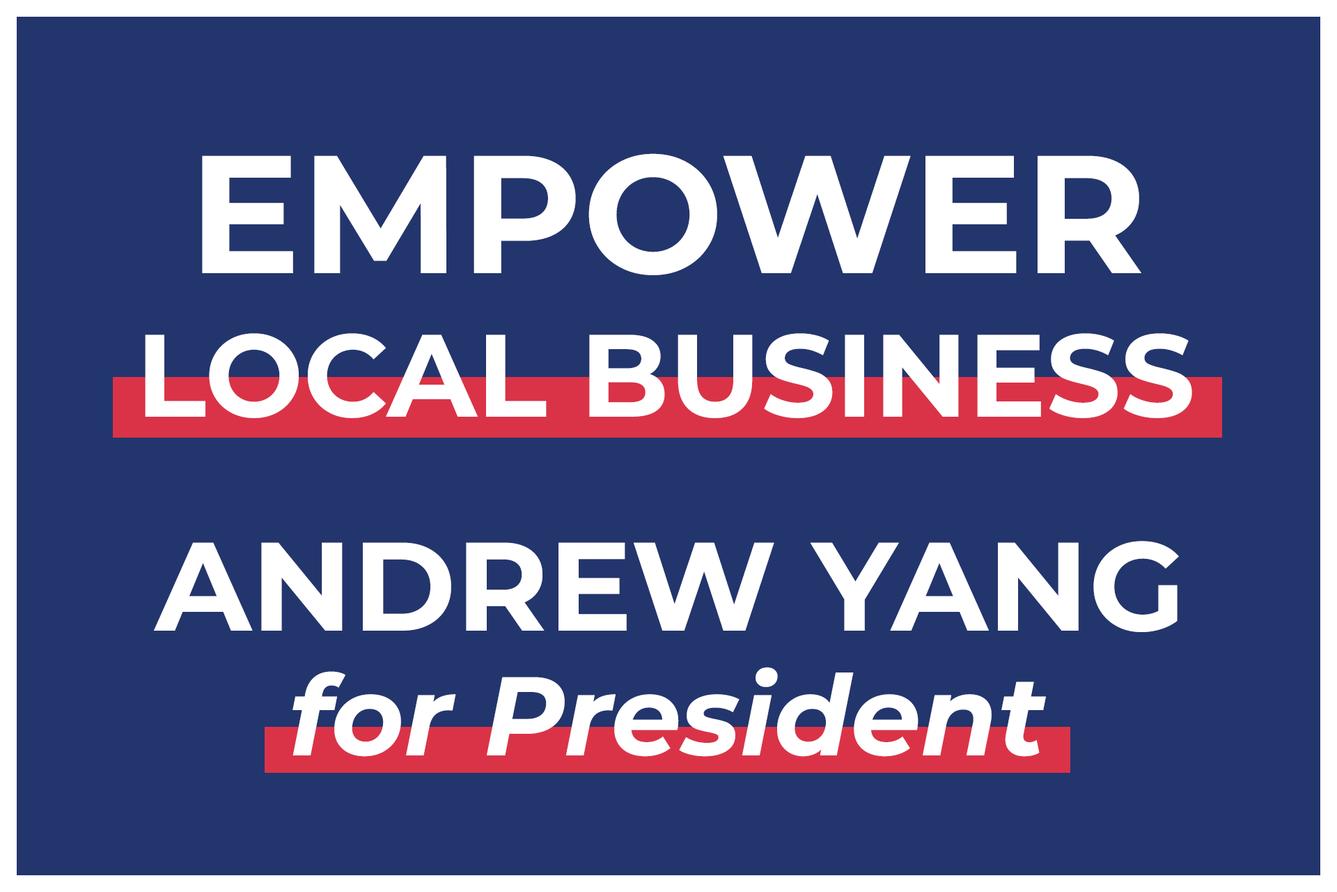
<style>
.page{position:relative;width:1337px;height:892px;background:#23356d}
.page>*{position:absolute;margin:0}
.t1{font:167.2px "Montserrat-Bold";color:#ffffff}
.t2{font:116.7px "Montserrat-Bold";color:#ffffff}
.t3{font:125.4px "Montserrat-Bold";color:#ffffff}
.t4{font:111.5px "Montserrat-BoldItalic";color:#ffffff}
</style>
<div class="page">
<p class="t1" style="left:202px;top:153px;width:940px;height:122px">EMPOWER</p>
<p class="t2" style="left:145px;top:333px;width:1048px;height:85px">LOCAL BUSINESS</p>
<p class="t3" style="left:154px;top:541px;width:1025px;height:91px">ANDREW YANG</p>
<p class="t4" style="left:293px;top:667px;width:753px;height:89px">for President</p>
</div>
